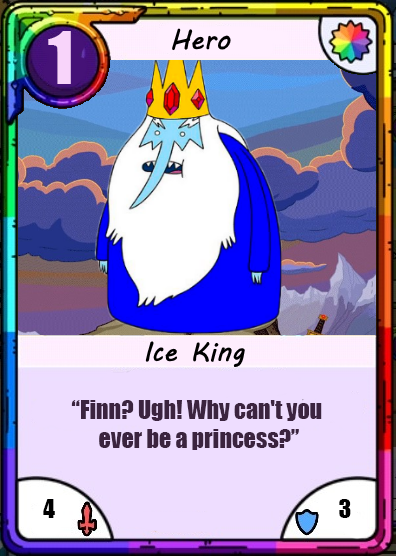
<style>
.page{position:relative;width:396px;height:556px}
.page>*{position:absolute;margin:0}
.t1{font:66.7px "Impact";color:#f8d4fa}
.t2{font:24px "Impact";color:#3b243f}
.t3{font:24px "Impact";color:#000000}
</style>
<div class="page">
<p class="t1" style="left:48px;top:31px;width:23px;height:53px">1</p>
<p class="t2" style="left:71px;top:400px;width:251px;height:50px;text-align:center">“Finn? Ugh! Why can't you <br>ever be a princess?”</p>
<p class="t3" style="left:43px;top:499px;width:12px;height:19px">4</p>
<p class="t3" style="left:339px;top:499px;width:12px;height:19px">3</p>
</div>
